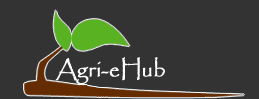
<style>
.page{position:relative;width:259px;height:99px;background:#333333}
.page>*{position:absolute;margin:0}
.t1{font:23.5px "Papyrus-Regular";color:#ffffff;font-weight:bold;scale:0.9 1}
</style>
<div class="page">
<p class="t1" style="left:55px;top:57px;width:110px;height:28px">Agri-eHub</p>
</div>
